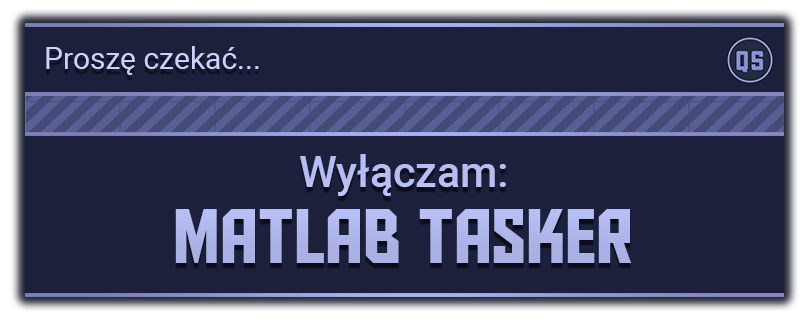
<style>
.page{position:relative;width:810px;height:325px;background:#1d203b}
.page>*{position:absolute;margin:0}
.t1{font:30px "Roboto-Regular";color:#ccd2ff}
.t2{font:76.2px/76.2px "AldotheApache";color:#b0b7eb}
.t3{font:42.9px/76.2px "Roboto-Medium";color:#b0b7eb}
</style>
<div class="page">
<p class="t1" style="left:46px;top:46px;width:213px;height:29px">Proszę czekać...</p>
<p class="t2" style="left:175px;top:154px;width:456px;height:109px;text-align:center"><span class="t3">Wyłączam:<br></span>MATLAB TASKER</p>
</div>
